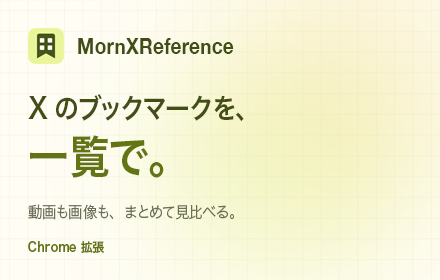
<style>
.page{position:relative;width:440px;height:280px}
.page>*{position:absolute;margin:0}
.t1{font:22px "HelveticaNeue-Bold";color:#424e16;scale:0.88 1}
.t2{font:28px "HiraginoSans-W6";color:#424e16;scale:0.88 1}
.t3{font:46px "HiraginoSans-W6";color:#637412;scale:0.88 1}
.t4{font:16px "HiraginoSans-W3";color:#6c7057;scale:0.88 1}
.t5{font:13px "HiraginoSans-W6";color:#637412;scale:0.88 1}
</style>
<div class="page">
<p class="t1" style="left:78px;top:38px;width:156px;height:16px">MornXReference</p>
<p class="t2" style="left:28px;top:94px;width:216px;height:28px">Xのブックマークを、</p>
<p class="t3" style="left:30px;top:135px;width:134px;height:43px">一覧で。</p>
<p class="t4" style="left:28px;top:204px;width:206px;height:16px">動画も画像も、まとめて見比べる。</p>
<p class="t5" style="left:28px;top:241px;width:76px;height:12px">Chrome 拡張</p>
</div>
